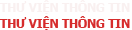
<style>
.page{position:relative;width:132px;height:30px;background:#ffffff}
.page>*{position:absolute;margin:0}
.t1{font:12px "Tahoma-Bold";color:#f9f0f0}
.t2{font:12px "Tahoma-Bold";color:#d62c2c}
</style>
<div class="page">
<p class="t1" style="left:0px;top:0px;width:130px;height:14px">THƯ VIỆN THÔNG TIN</p>
<p class="t2" style="left:0px;top:16px;width:130px;height:14px">THƯ VIỆN THÔNG TIN</p>
</div>
